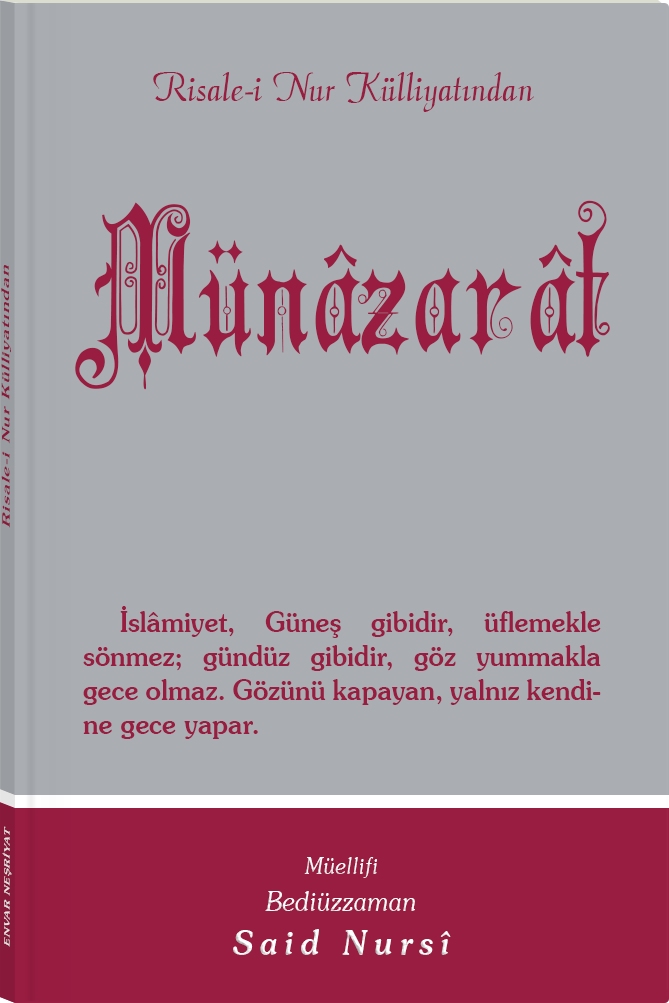
<style>
.page{position:relative;width:669px;height:1003px;background:#aaaeb2}
.page>*{position:absolute;margin:0}
.t1{font:45.3px "Barla © 072 Aria ScriptScriptSSi";color:#991c41;scale:0.94 1}
.t2{font:190.9px "Barla © 001 Liva Nur";letter-spacing:-0.001em;color:#991c41;scale:0.92 1}
.t3{font:11.4px "Souvenir-Medium";letter-spacing:0.08em;color:#991c41;scale:1.65 1}
.t4{font:28.3px/34px "Souvenir-Medium";color:#991c41;scale:0.92 1}
.t5{font:8.3px "Souvenir-Medium";letter-spacing:0.08em;color:#e5e5e5;scale:1.43 1}
.t6{font:27.1px/37.8px "Souvenir-LightItalic";color:#ffffff;scale:0.92 1}
.t7{font:22.8px/39.8px "Souvenir-LightItalic";color:#ffffff;scale:0.92 1}
.t8{font:33.9px/43.8px "Souvenir-MediumItalic";letter-spacing:0.2em;color:#ffffff;scale:0.92 1}
</style>
<div class="page">
<p class="t1" style="left:153px;top:72px;width:381px;height:40px">Risale-i Nur Külliyatından</p>
<p class="t2" style="left:75px;top:200px;width:535px;height:190px">Münâzarât</p>
<p class="t3" style="left:1px;top:265px;width:10px;height:263px;rotate:-90deg">Risale-i Nur Külliyatından</p>
<p class="t4" style="left:83px;top:606px;width:518px;height:133px;text-align:justify">İslâmiyet, Güneş gibidir, üflemekle sönmez; gündüz gibidir, göz yummakla gece olmaz. Gözünü kapayan, yalnız kendine gece yapar.</p>
<p class="t5" style="left:2px;top:826px;width:10px;height:121px;rotate:-90deg">ENVAR NEŞRİYAT</p>
<p class="t6" style="left:233px;top:857px;width:218px;height:98px;text-align:center"><span class="t7">Müellifi<br></span>Bediüzzaman<br><span class="t8">Said Nursî</span></p>
</div>
